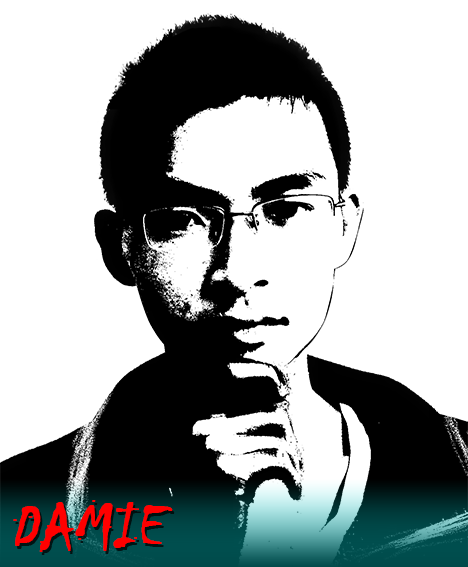
<style>
.page{position:relative;width:468px;height:567px;background:#ffffff}
.page>*{position:absolute;margin:0}
.t1{font:64px "Chiller-Regular";color:#ff0000;font-weight:bold;font-style:italic}
</style>
<div class="page">
<p class="t1" style="left:13px;top:500px;width:160px;height:52px">DAMIE</p>
</div>
